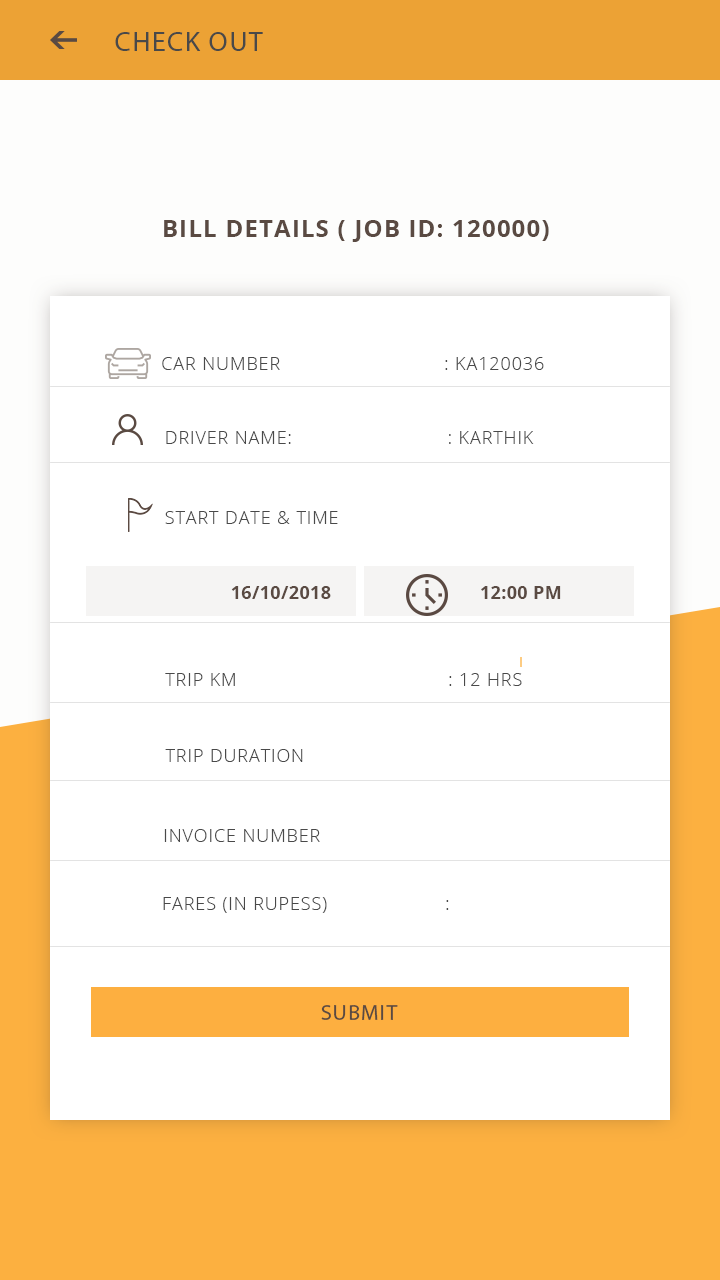
<style>
.page{position:relative;width:720px;height:1280px;background:#ffffff}
.page>*{position:absolute;margin:0}
.t1{font:28px "MyriadPro-Regular";letter-spacing:0.05em;color:#494949;text-transform:uppercase}
.t2{font:24px "OpenSans-Bold";letter-spacing:0.05em;color:#5a4a42;text-transform:uppercase}
.t3{font:18px "OpenSans-Light";letter-spacing:0.05em;color:#494949;text-transform:uppercase}
.t4{font:18px "OpenSans-Light";letter-spacing:0.05em;color:#494949}
.t5{font:18px "OpenSans-Bold";letter-spacing:0.02em;color:#5a4a42}
.t6{font:22px "MyriadPro-Regular";letter-spacing:0.05em;color:#5a4a42}
</style>
<div class="page">
<p class="t1" style="left:115px;top:32px;width:148px;height:19px">Check out</p>
<p class="t2" style="left:164px;top:220px;width:385px;height:22px">BILL details ( JOB ID: 120000)</p>
<p class="t3" style="left:162px;top:357px;width:382px;height:13px">CAR NUMBER  : KA120036</p>
<p class="t4" style="left:166px;top:431px;width:368px;height:13px">DRIVER NAME:  : KARTHIK</p>
<p class="t4" style="left:165px;top:511px;width:173px;height:13px">START DATE &amp; TIME</p>
<p class="t5" style="left:231px;top:586px;width:100px;height:13px">16/10/2018</p>
<p class="t5" style="left:481px;top:586px;width:80px;height:13px">12:00 PM</p>
<p class="t3" style="left:165px;top:673px;width:357px;height:13px">TRIP KM   : 12 hrs</p>
<p class="t3" style="left:165px;top:749px;width:138px;height:13px">TRIP DURATION</p>
<p class="t3" style="left:164px;top:829px;width:156px;height:13px">INVOICE NUMBER</p>
<p class="t3" style="left:163px;top:897px;width:286px;height:16px">FARES (IN RUPESS)  :</p>
<p class="t6" style="left:321px;top:1005px;width:77px;height:15px">SUBMIT</p>
</div>
